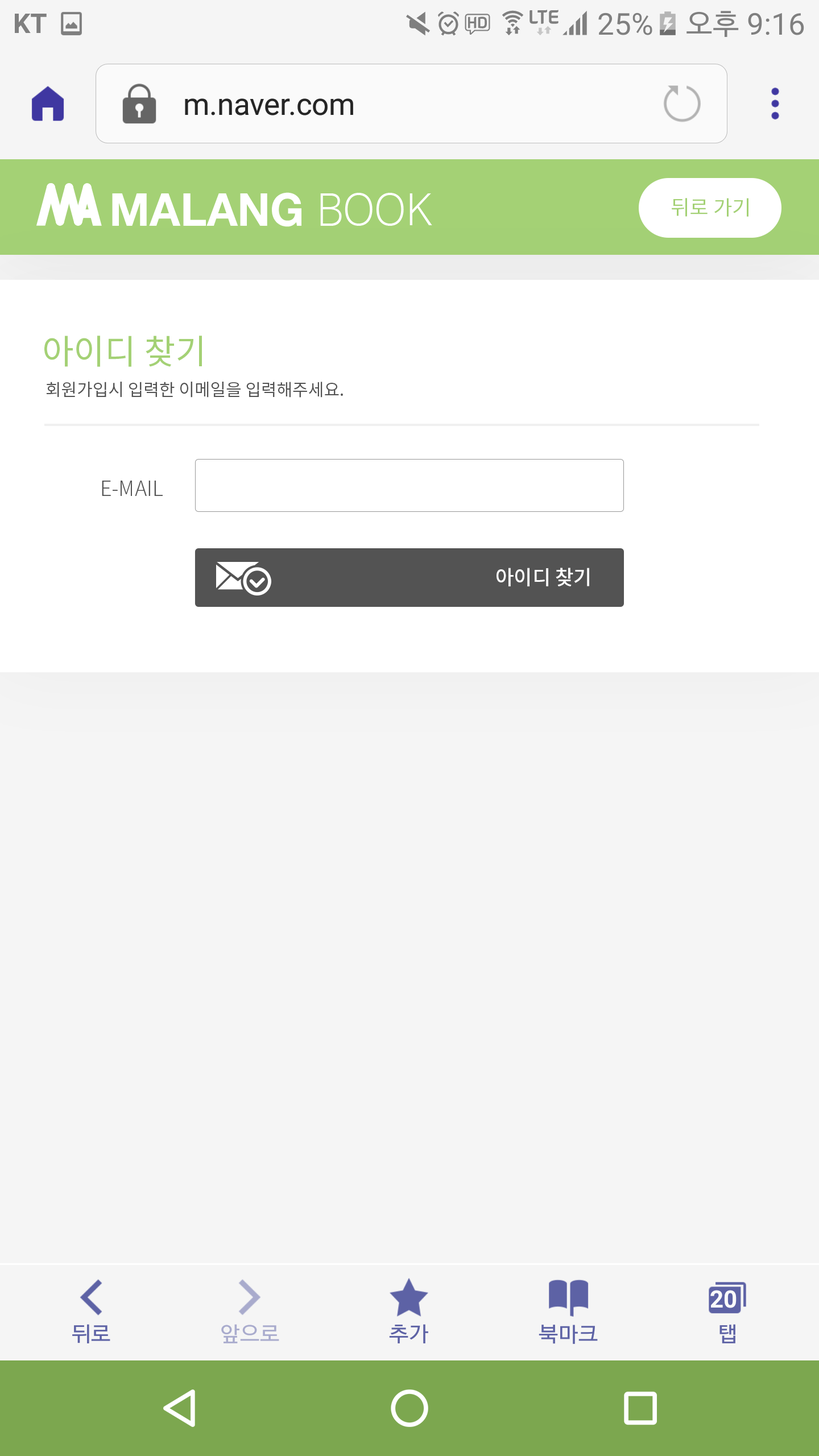
<style>
.page{position:relative;width:819px;height:1456px;background:#f5f5f5}
.page>*{position:absolute;margin:0}
.t1{font:20.5px "NotoSansCJKkr-Regular";color:#a4d175}
.t2{font:34.1px "NotoSansCJKkr-Regular";color:#a4d175}
.t3{font:17.1px "NotoSansCJKkr-Regular";color:#535353}
.t4{font:20.5px "NotoSansCJKkr-Light";color:#535353}
.t5{font:19.9px "NotoSansCJKkr-Medium";color:#ffffff}
</style>
<div class="page">
<p class="t1" style="left:672px;top:198px;width:76px;height:19px">뒤로 가기</p>
<p class="t2" style="left:44px;top:336px;width:158px;height:31px">아이디 찾기</p>
<p class="t3" style="left:46px;top:382px;width:297px;height:16px">회원가입시 입력한 이메일을 입력해주세요.</p>
<p class="t4" style="left:102px;top:481px;width:61px;height:15px">E-MAIL</p>
<p class="t5" style="left:497px;top:568px;width:92px;height:18px">아이디 찾기</p>
</div>
